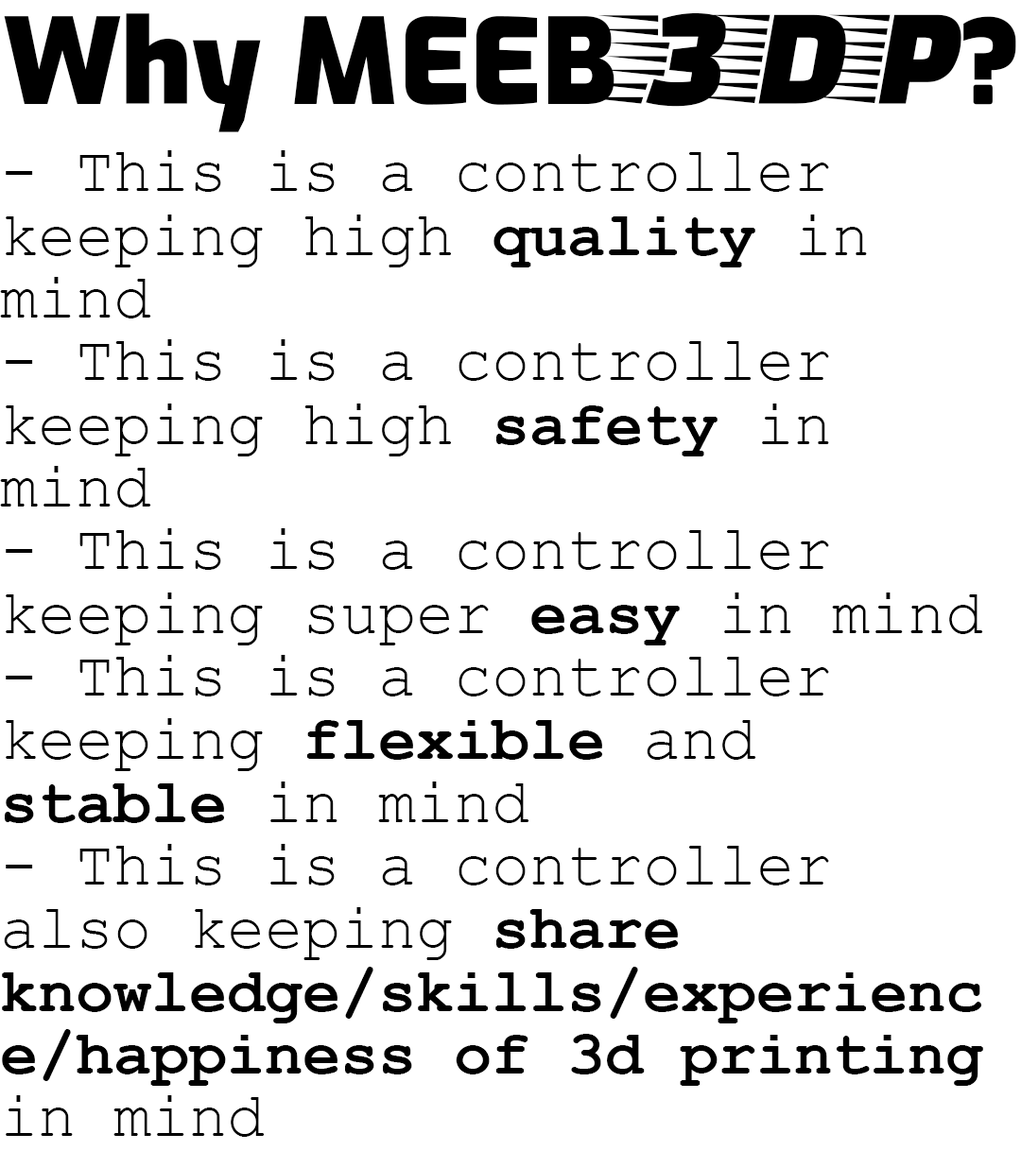
<style>
.page{position:relative;width:1021px;height:1168px;background:#ffffff}
.page>*{position:absolute;margin:0}
.t1{font:118.1px "Exo-Black";color:#000000}
.t2{font:141.8px "FasterOne-Regular";color:#000000}
.t3{font:63px/63px "CourierNewPS-BoldMT";color:#000000}
.t4{font:63px/63px "CourierNewPSMT";color:#000000}
</style>
<div class="page">
<p class="t1" style="left:4px;top:13px;width:1012px;height:119px">Why MEEB<span class="t2">3DP</span>?</p>
<p class="t3" style="left:0px;top:150px;width:983px;height:987px"><span class="t4">- This is a controller keeping high </span>quality <span class="t4">in mind<br>- This is a controller keeping high </span>safety <span class="t4">in mind<br>- This is a controller keeping super </span>easy <span class="t4">in mind<br>- This is a controller keeping </span>flexible <span class="t4">and </span>stable <span class="t4">in mind<br>- This is a controller also keeping </span>share knowledge/skills/experience/happiness of 3d printing<span class="t4"> in mind</span></p>
</div>
